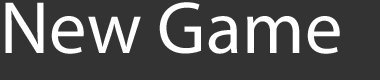
<style>
.page{position:relative;width:380px;height:80px;background:#333333}
.page>*{position:absolute;margin:0}
.t1{font:74.7px "MyriadPro-Regular";color:#ffffff}
</style>
<div class="page">
<p class="t1" style="left:5px;top:2px;width:335px;height:52px">New Game</p>
</div>
